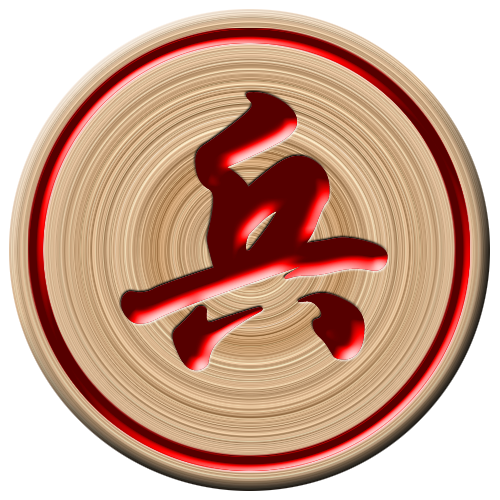
<style>
.page{position:relative;width:500px;height:500px;background:#ffffff}
.page>*{position:absolute;margin:0}
.t1{font:360px "STXingkai"}
</style>
<div class="page">
<p class="t1" style="left:121px;top:92px;width:267px;height:279px">兵</p>
</div>
